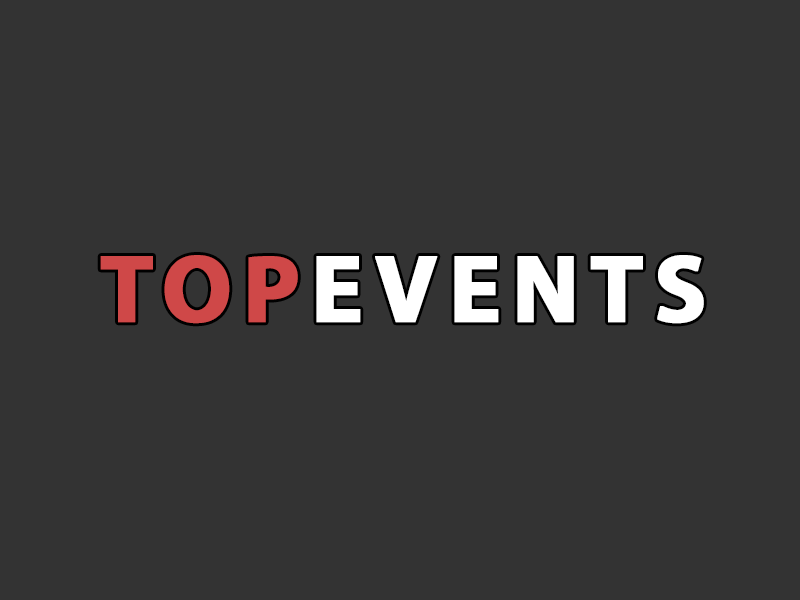
<style>
.page{position:relative;width:800px;height:600px;background:#333333}
.page>*{position:absolute;margin:0}
.t1{font:96px "MyriadPro-Bold";letter-spacing:0.1em;color:#ffffff;text-transform:uppercase;font-weight:bold}
.t2{font:96px "MyriadPro-Bold";letter-spacing:0.1em;color:#cf4848;text-transform:uppercase;font-weight:bold}
</style>
<div class="page">
<p class="t1" style="left:100px;top:255px;width:604px;height:69px"><span class="t2">TOP</span>Events</p>
</div>
